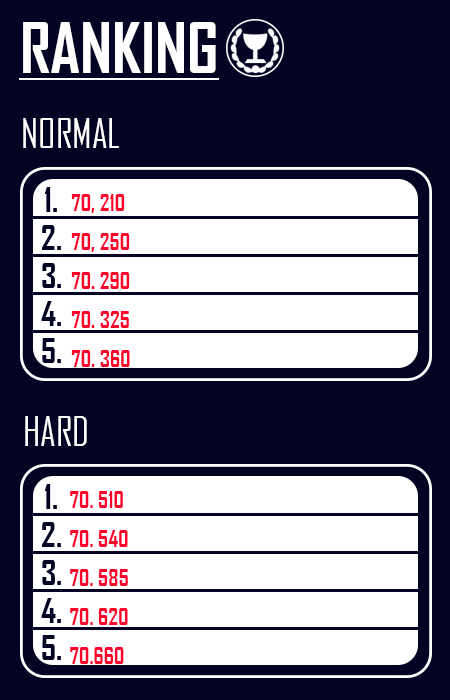
<style>
.page{position:relative;width:450px;height:700px;background:#030424}
.page>*{position:absolute;margin:0}
.t1{font:66.7px "AgencyFB-Bold";color:#ffffff}
.t2{font:38.9px "AgencyFB-Reg";color:#ffffff}
.t3{font:22.2px "AgencyFB-Bold";color:#ff022c}
</style>
<div class="page">
<p class="t1" style="left:23px;top:22px;width:193px;height:51px">RANKING</p>
<p class="t2" style="left:23px;top:118px;width:96px;height:30px">NORMAL</p>
<p class="t3" style="left:71px;top:194px;width:59px;height:173px">70, 210<br>70, 250<br>70. 290<br>70. 325<br>70. 360</p>
<p class="t2" style="left:25px;top:416px;width:62px;height:30px">HARD</p>
<p class="t3" style="left:70px;top:491px;width:58px;height:173px">70. 510<br>70. 540<br>70. 585<br>70. 620<br>70.660</p>
</div>
